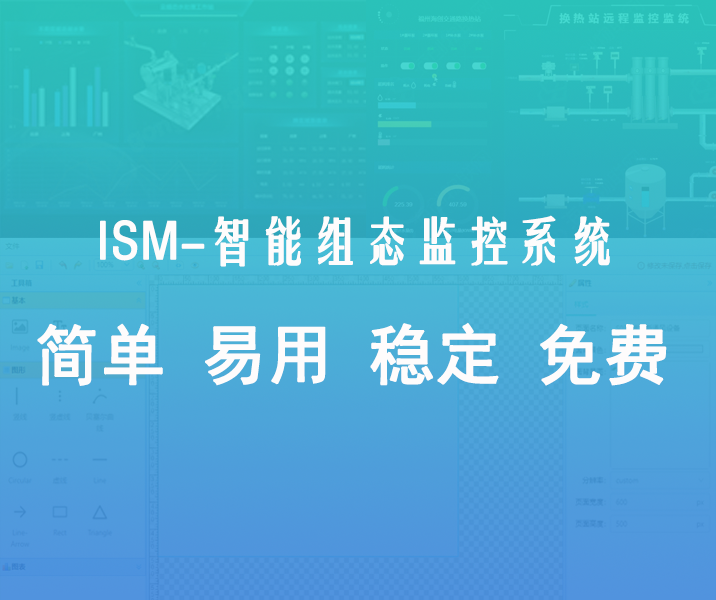
<style>
.page{position:relative;width:716px;height:600px}
.page>*{position:absolute;margin:0}
.t1{font:50px "FZYTK--GBK1-0";color:#fefcfc;font-weight:bold}
.t2{font:65px "SimHei";color:#fefcfc;font-weight:bold}
</style>
<div class="page">
<p class="t1" style="left:100px;top:215px;width:510px;height:52px">ISM-智能组态监控系统</p>
<p class="t2" style="left:37px;top:322px;width:630px;height:64px">简单 易用 稳定 免费</p>
</div>
